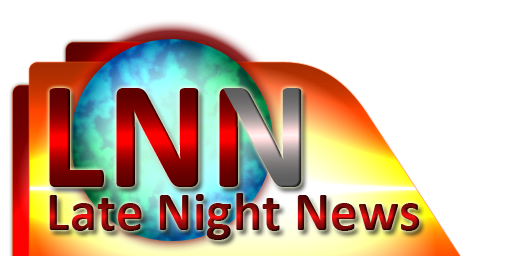
<style>
.page{position:relative;width:512px;height:256px;background:#ffffff}
.page>*{position:absolute;margin:0}
.t1{font:156.5px "Calibri-Bold"}
.t2{font:55.3px "Calibri-Bold"}
</style>
<div class="page">
<p class="t1" style="left:49px;top:88px;width:253px;height:99px">LNN</p>
<p class="t2" style="left:49px;top:193px;width:371px;height:47px">Late Night News</p>
</div>
